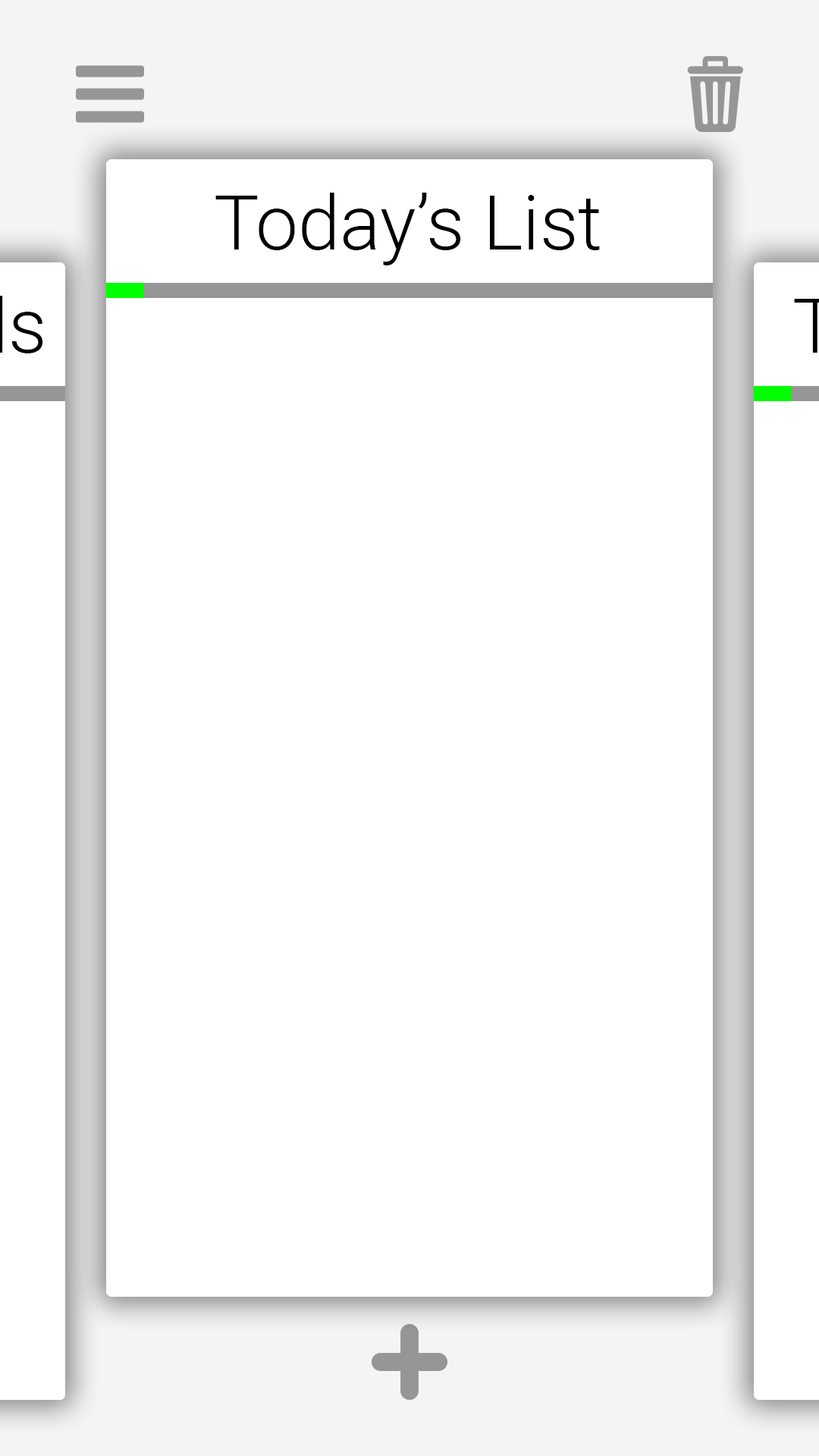
<style>
.page{position:relative;width:819px;height:1456px;background:#ffffff}
.page>*{position:absolute;margin:0}
.t1{font:75.8px "Roboto-Light";color:#000000}
</style>
<div class="page">
<p class="t1" style="left:215px;top:193px;width:385px;height:72px">Today’s List</p>
</div>
